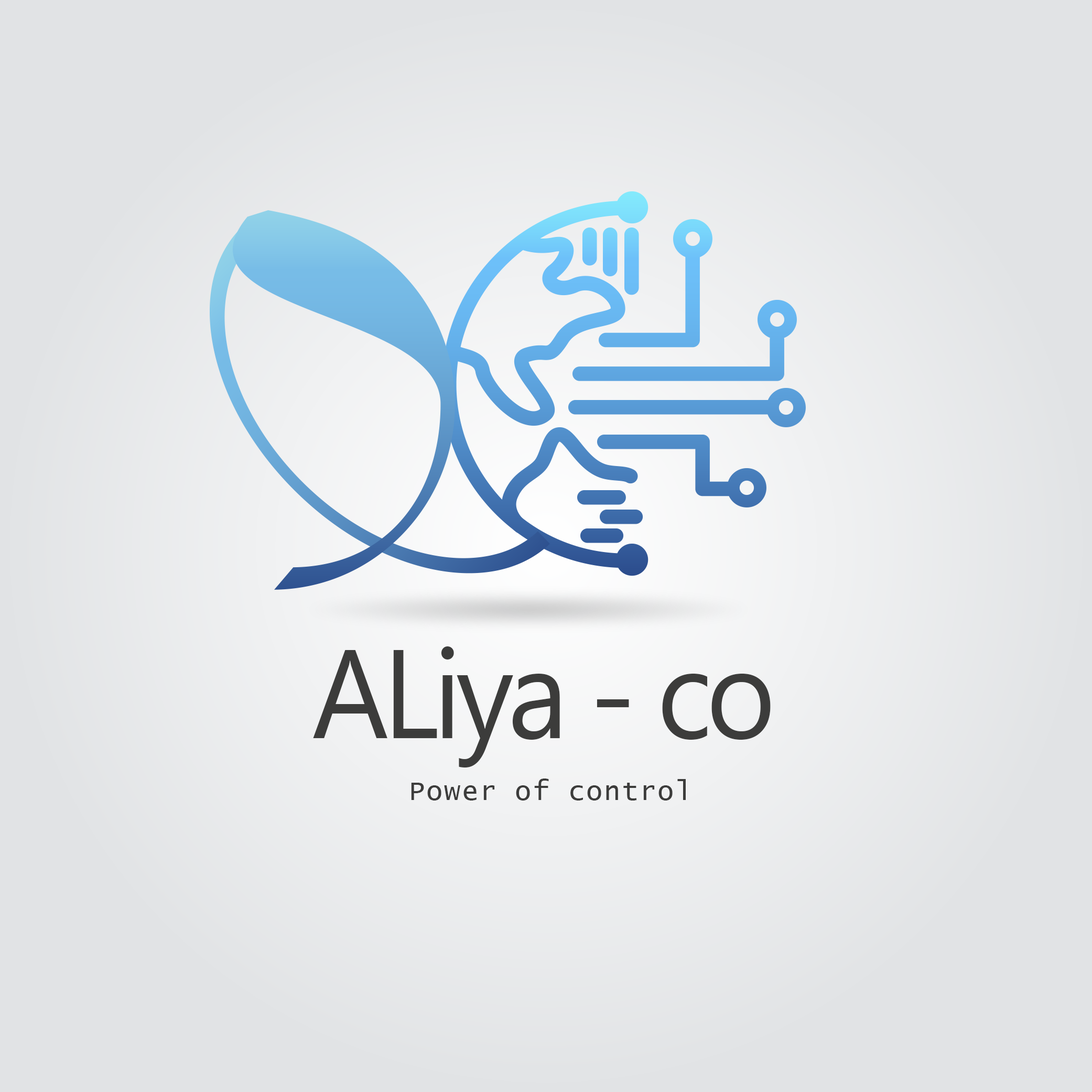
<style>
.page{position:relative;width:1092px;height:1092px;background:#e1e3e5}
.page>*{position:absolute;margin:0}
.t1{font:126.1px "Gadugi";letter-spacing:-0.05em;color:#3c3c3b;scale:0.94 1}
.t2{font:27.3px "LucidaConsole";letter-spacing:0.05em;color:#3c3c3b}
</style>
<div class="page">
<p class="t1" style="left:313px;top:646px;width:458px;height:121px">ALiya - co</p>
<p class="t2" style="left:411px;top:778px;width:275px;height:23px">Power of control</p>
</div>
